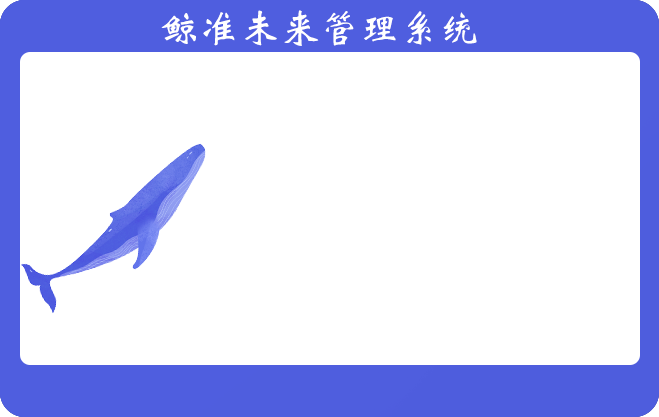
<style>
.page{position:relative;width:659px;height:417px;background:#ffffff}
.page>*{position:absolute;margin:0}
.t1{font:40px "STXinwei";color:#ffffff}
</style>
<div class="page">
<p class="t1" style="left:161px;top:10px;width:316px;height:36px">鲸准未来管理系统</p>
</div>
